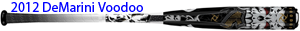
<style>
.page{position:relative;width:300px;height:31px;background:#ffffff}
.page>*{position:absolute;margin:0}
.t1{font:14px "MyriadPro-Regular";color:#0000ff}
</style>
<div class="page">
<p class="t1" style="left:11px;top:2px;width:132px;height:10px">2012 DeMarini Voodoo</p>
</div>
